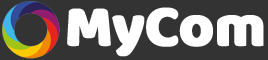
<style>
.page{position:relative;width:268px;height:60px;background:#333333}
.page>*{position:absolute;margin:0}
.t1{font:60px "BalooBhai-Regular";letter-spacing:-0.02em;color:#ffffff;font-weight:bold}
</style>
<div class="page">
<p class="t1" style="left:67px;top:7px;width:197px;height:50px">MyCom</p>
</div>
